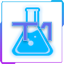
<style>
.page{position:relative;width:64px;height:64px;background:#ffffff}
.page>*{position:absolute;margin:0}
.t1{font:24px "MassEffect123"}
</style>
<div class="page">
<p class="t1" style="left:11px;top:21px;width:41px;height:20px">T1</p>
</div>
